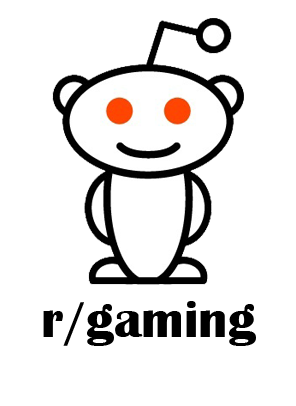
<style>
.page{position:relative;width:296px;height:406px;background:#ffffff}
.page>*{position:absolute;margin:0}
.t1{font:52px "BritannicBold";color:#000000}
</style>
<div class="page">
<p class="t1" style="left:43px;top:301px;width:213px;height:45px">r/gaming</p>
</div>
